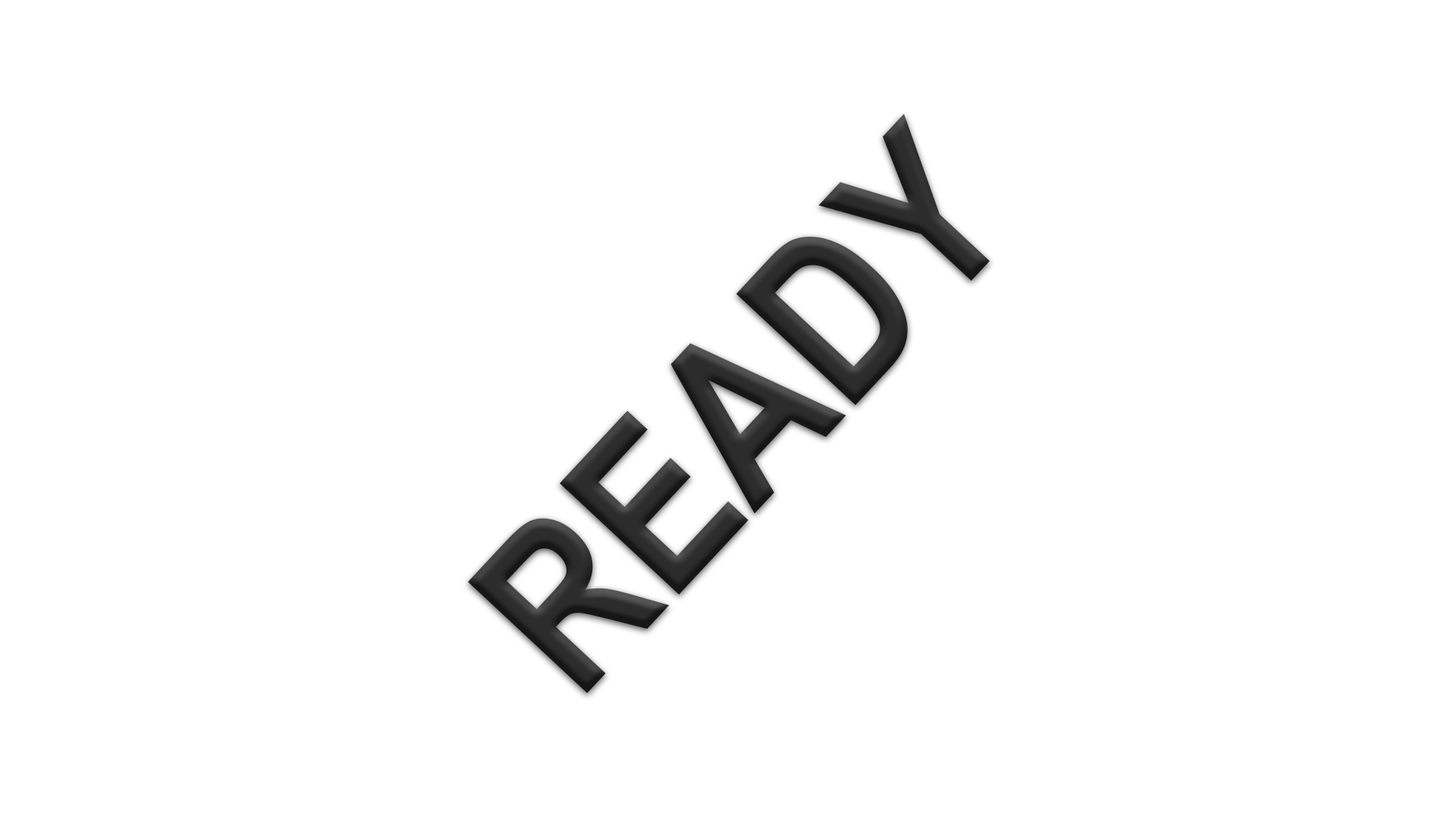
<style>
.page{position:relative;width:1456px;height:819px;background:#ffffff}
.page>*{position:absolute;margin:0}
.t1{font:227.5px "ArialNarrow-Bold";color:#2c2c2c}
</style>
<div class="page">
<p class="t1" style="left:468px;top:114px;width:522px;height:579px;rotate:-47deg">READY</p>
</div>
